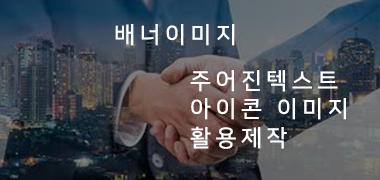
<style>
.page{position:relative;width:380px;height:180px}
.page>*{position:absolute;margin:0}
.t1{font:23px "NanumSquareB";letter-spacing:0.2em;color:#ffffff}
.t2{font:23px/28.7px "NanumSquareB";letter-spacing:0.2em;color:#ffffff}
</style>
<div class="page">
<p class="t1" style="left:115px;top:24px;width:120px;height:22px">배너이미지</p>
<p class="t2" style="left:190px;top:70px;width:156px;height:79px">주어진텍스트<br>아이콘 이미지<br>활용제작</p>
</div>
